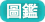
<style>
.page{position:relative;width:45px;height:22px}
.page>*{position:absolute;margin:0}
.t1{font:16px "GothicMB101Pr6N-Medium";color:#fffffc}
</style>
<div class="page">
<p class="t1" style="left:7px;top:3px;width:31px;height:16px">圖鑑</p>
</div>
